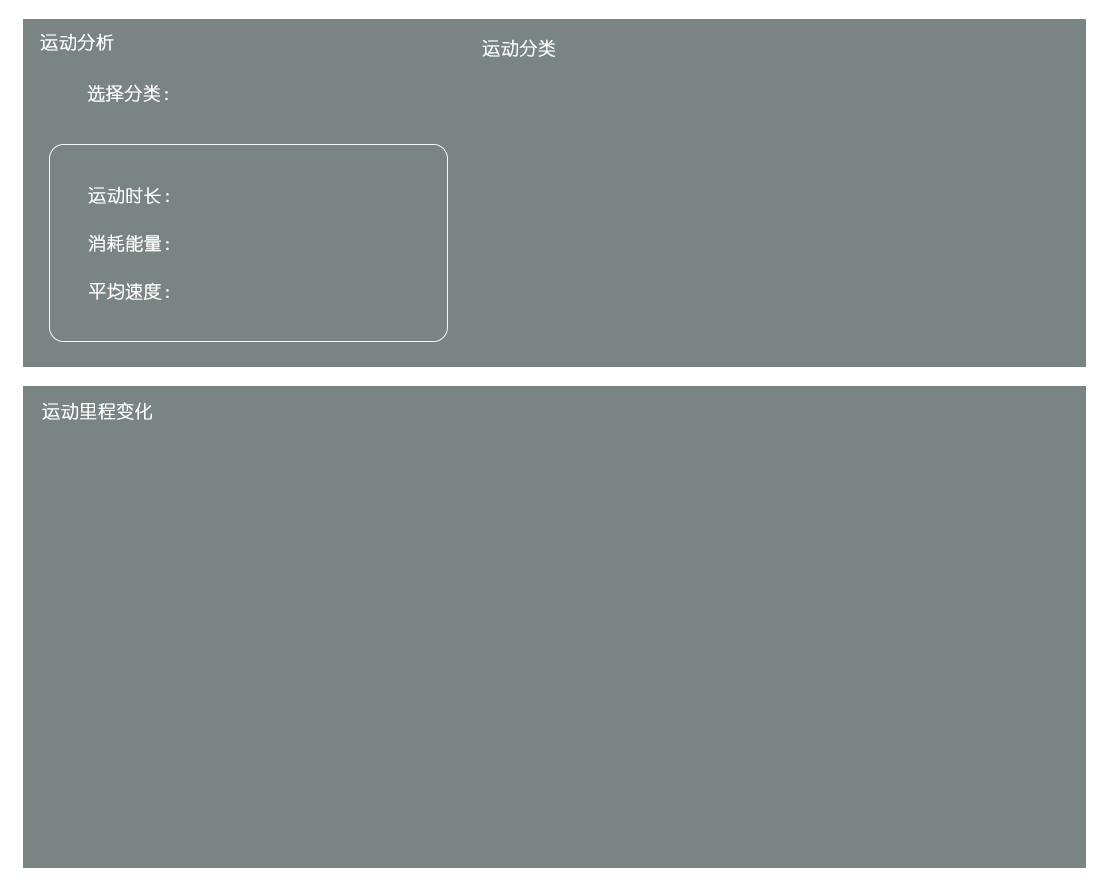
<style>
.page{position:relative;width:1111px;height:888px;background:#798483}
.page>*{position:absolute;margin:0}
.t1{font:18px "YouYuan";color:#ffffff;font-weight:bold}
.t2{font:18px/16px "YouYuan";color:#ffffff;font-weight:bold}
</style>
<div class="page">
<p class="t1" style="left:40px;top:33px;width:74px;height:18px">运动分析</p>
<p class="t1" style="left:482px;top:39px;width:73px;height:18px">运动分类</p>
<p class="t1" style="left:87px;top:84px;width:81px;height:18px">选择分类：</p>
<p class="t2" style="left:88px;top:186px;width:81px;height:114px">运动时长：<br><br><br>消耗能量：<br><br><br>平均速度：</p>
<p class="t1" style="left:42px;top:402px;width:110px;height:18px">运动里程变化</p>
</div>
